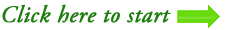
<style>
.page{position:relative;width:228px;height:30px;background:#ffffff}
.page>*{position:absolute;margin:0}
.t1{font:24px "AGaramondPro-Italic";color:#1e7d0f;font-weight:bold}
</style>
<div class="page">
<p class="t1" style="left:2px;top:4px;width:169px;height:19px">Click here to start</p>
</div>
